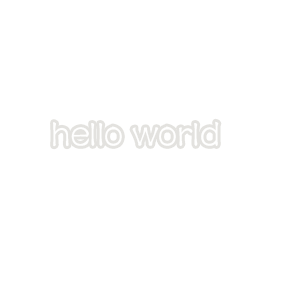
<style>
.page{position:relative;width:283px;height:283px;background:#ffffff}
.page>*{position:absolute;margin:0}
.t1{font:42.5px "FZSTK--GBK1-0";color:#ffffff;scale:0.84 1}
</style>
<div class="page">
<p class="t1" style="left:53px;top:121px;width:166px;height:26px">hello world</p>
</div>
